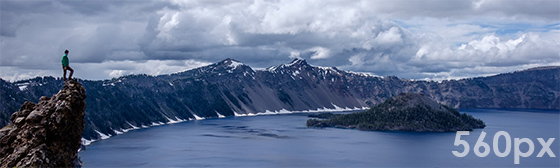
<style>
.page{position:relative;width:560px;height:168px}
.page>*{position:absolute;margin:0}
.t1{font:36px "CenturyGothic-Bold";color:#bbc3d4}
</style>
<div class="page">
<p class="t1" style="left:451px;top:131px;width:105px;height:33px">560px</p>
</div>
